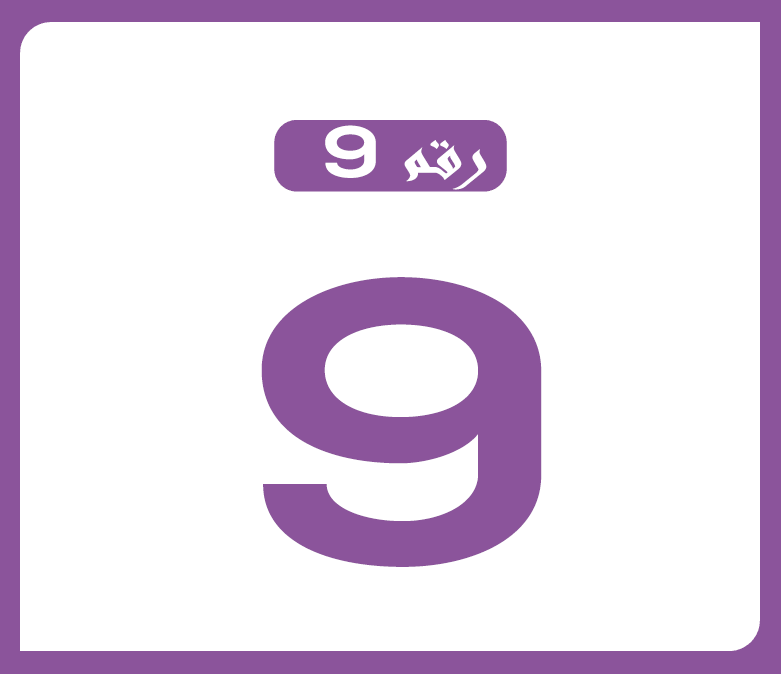
<style>
.page{position:relative;width:781px;height:674px;background:#ffffff}
.page>*{position:absolute;margin:0}
.t1{font:72px "Andalus";color:#ffffff;scale:1.2 1}
.t2{font:72px "NexaBold";color:#ffffff;scale:1.2 1}
.t3{font:400px "NexaBold";color:#8b549b;scale:1.2 1}
</style>
<div class="page">
<p class="t1" style="left:325px;top:125px;width:162px;height:65px">رقم <span class="t2">9</span></p>
<p class="t3" style="left:261px;top:277px;width:281px;height:290px">9</p>
</div>
